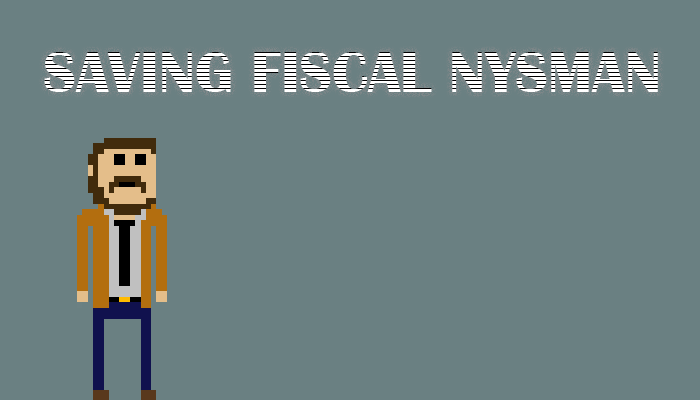
<style>
.page{position:relative;width:700px;height:400px;background:#6a8082}
.page>*{position:absolute;margin:0}
.t1{font:60px "BritannicBold";color:#ffffff}
</style>
<div class="page">
<p class="t1" style="left:44px;top:52px;width:614px;height:40px">SAVING FISCAL NYSMAN</p>
</div>
